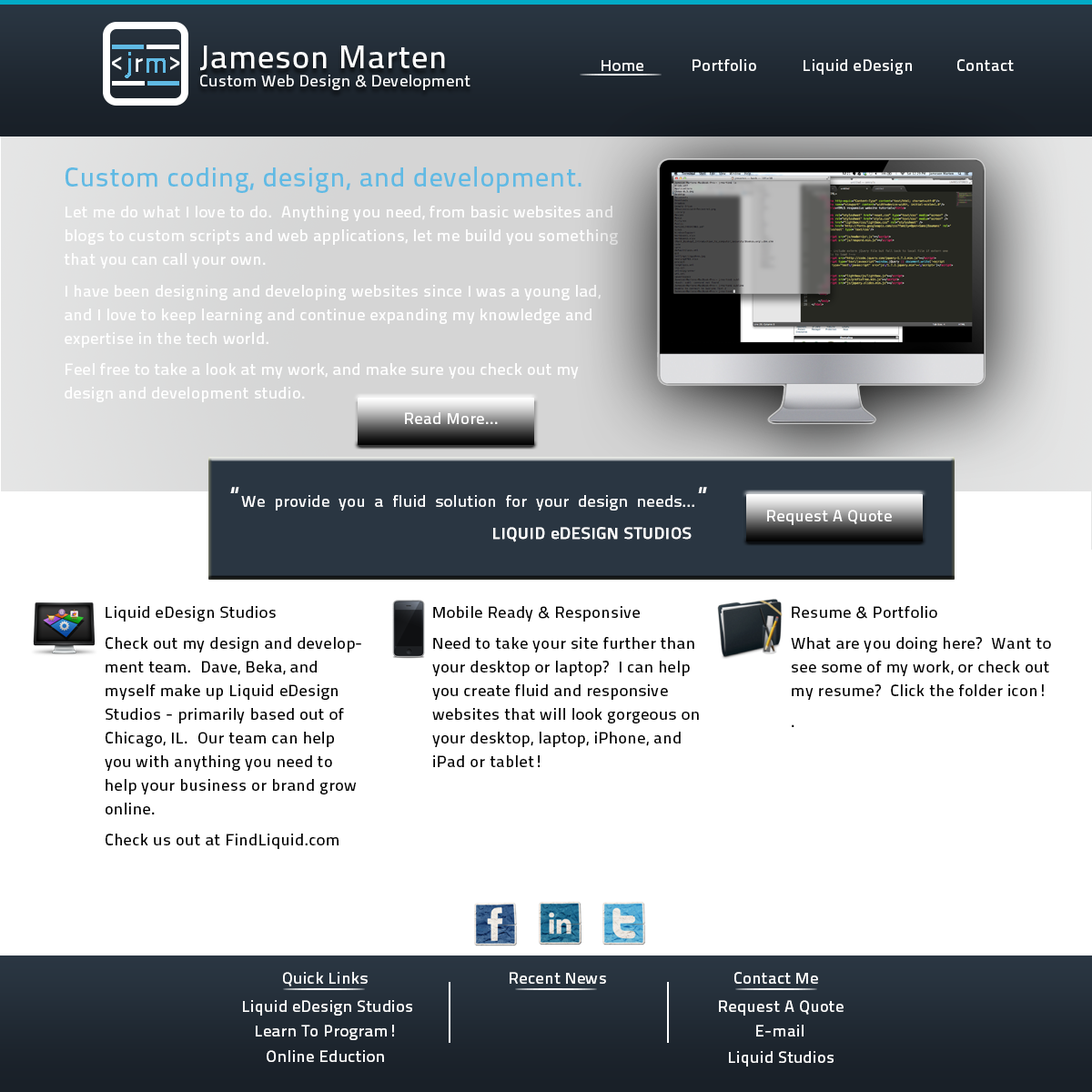
<style>
.page{position:relative;width:1092px;height:1092px;background:#ffffff}
.page>*{position:absolute;margin:0}
.t1{font:32.8px "TitilliumText25L-600wt";letter-spacing:0.03em;color:#ffffff}
.t2{font:16.4px "TitilliumText25L-600wt";letter-spacing:0.03em;color:#ffffff}
.t3{font:16.4px/23.7px "TitilliumText25L-600wt";letter-spacing:0.03em;color:#ffffff}
.t4{font:27.3px/23.7px "TitilliumText25L-600wt";letter-spacing:0.03em;color:#60bae4}
.t5{font:27.3px/23.7px "TitilliumText25L-600wt";letter-spacing:0.03em;color:#ffffff}
.t6{font:16.4px/23.7px "TitilliumText25L-600wt";letter-spacing:0.03em;color:#ffffff;font-weight:bold}
.t7{font:16.4px/23.7px "TitilliumText25L-600wt";letter-spacing:0.03em;color:#000000}
</style>
<div class="page">
<p class="t1" style="left:200px;top:45px;width:245px;height:26px">Jameson Marten</p>
<p class="t2" style="left:602px;top:60px;width:41px;height:11px">Home</p>
<p class="t2" style="left:693px;top:59px;width:63px;height:12px">Portfolio</p>
<p class="t2" style="left:804px;top:59px;width:108px;height:16px">Liquid eDesign</p>
<p class="t2" style="left:957px;top:59px;width:57px;height:12px">Contact</p>
<p class="t2" style="left:200px;top:75px;width:270px;height:15px">Custom Web Design &amp; Development</p>
<p class="t3" style="left:64px;top:167px;width:554px;height:235px"><span class="t4">Custom coding, design, and development.<br></span>Let me do what I love to do.  Anything you need, from basic websites and blogs to custom scripts and web applications, let me build you something that you can call your own.<br>I have been designing and developing websites since I was a young lad, and I love to keep learning and continue expanding my knowledge and expertise in the tech world.<br>Feel free to take a look at my work, and make sure you check out my design and development studio.</p>
<p class="t2" style="left:405px;top:412px;width:93px;height:12px">Read More...</p>
<p class="t3" style="left:230px;top:487px;width:477px;height:55px"><span class="t5">“</span>We  provide  you  a  fluid  solution  for  your  design  needs...<span class="t5">”<br> </span><span class="t6">       LIQUID eDESIGN STUDIOS</span></p>
<p class="t2" style="left:767px;top:510px;width:125px;height:15px">Request A Quote</p>
<p class="t7" style="left:105px;top:606px;width:256px;height:243px">Liquid eDesign Studios<br>Check out my design and development team.  Dave, Beka, and myself make up Liquid eDesign Studios - primarily based out of Chicago, IL.  Our team can help you with anything you need to help your business or brand grow online.  <br>Check us out at FindLiquid.com<br>...<br>...<br>...</p>
<p class="t7" style="left:432px;top:606px;width:267px;height:161px">Mobile Ready &amp; Responsive<br>Need to take your site further than your desktop or laptop?  I can help you create fluid and responsive websites that will look gorgeous on your desktop, laptop, iPhone, and iPad or tablet!</p>
<p class="t7" style="left:791px;top:606px;width:260px;height:121px">Resume &amp; Portfolio<br>What are you doing here?  Want to see some of my work, or check out my resume?  Click the folder icon!<br>.</p>
<p class="t2" style="left:283px;top:972px;width:85px;height:14px">Quick Links</p>
<p class="t2" style="left:510px;top:972px;width:96px;height:12px">Recent News</p>
<p class="t2" style="left:734px;top:972px;width:84px;height:12px">Contact Me</p>
<p class="t2" style="left:243px;top:1000px;width:169px;height:16px">Liquid eDesign Studios</p>
<p class="t2" style="left:719px;top:1000px;width:125px;height:16px">Request A Quote</p>
<p class="t2" style="left:256px;top:1025px;width:138px;height:15px">Learn To Program!</p>
<p class="t2" style="left:756px;top:1025px;width:48px;height:11px">E-mail</p>
<p class="t2" style="left:267px;top:1050px;width:117px;height:12px">Online Eduction</p>
<p class="t2" style="left:729px;top:1051px;width:105px;height:16px">Liquid Studios</p>
</div>
